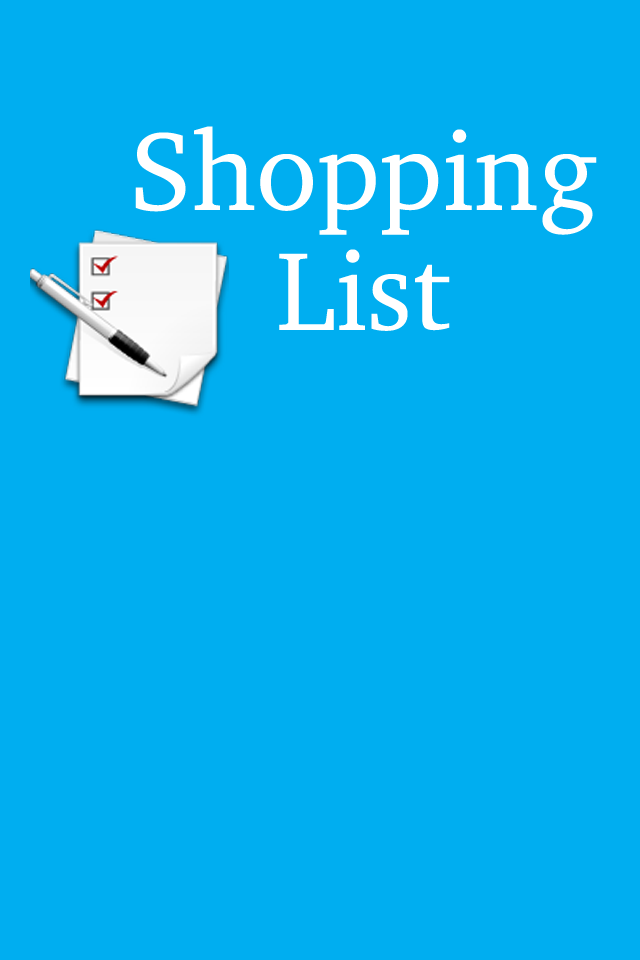
<style>
.page{position:relative;width:640px;height:960px;background:#00aef0}
.page>*{position:absolute;margin:0}
.t1{font:113.3px/120px "Charter-Roman";color:#ffffff}
</style>
<div class="page">
<p class="t1" style="left:135px;top:126px;width:462px;height:205px;text-align:center">Shopping<br>List</p>
</div>
